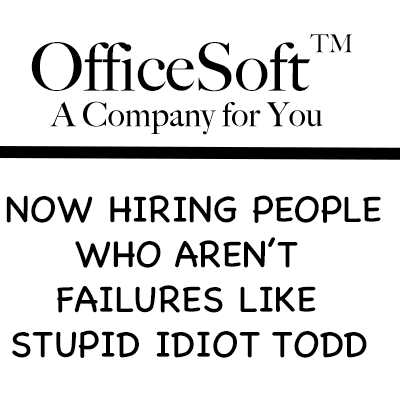
<style>
.page{position:relative;width:400px;height:400px;background:#ffffff}
.page>*{position:absolute;margin:0}
.t1{font:25px "BigCaslon-Medium";color:#000000}
.t2{font:66.7px "BigCaslon-Medium";color:#000000}
.t3{font:37.5px "ChalkboardSE-Regular";color:#000000}
</style>
<div class="page">
<p class="t1" style="left:310px;top:34px;width:43px;height:19px">TM</p>
<p class="t2" style="left:31px;top:42px;width:280px;height:50px">OfficeSoft</p>
<p class="t3" style="left:6px;top:195px;width:375px;height:163px;text-align:center">NOW HIRING PEOPLE<br>WHO AREN’T <br>FAILURES LIKE <br>STUPID IDIOT TODD</p>
</div>
